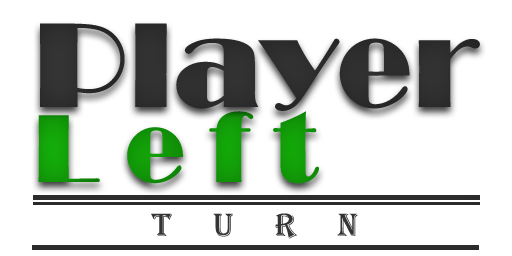
<style>
.page{position:relative;width:512px;height:256px;background:#ffffff}
.page>*{position:absolute;margin:0}
.t1{font:125px "Broadway";color:#383838}
.t2{font:100px "Broadway";color:#129d08}
.t3{font:33.3px "Algerian";color:#343434}
</style>
<div class="page">
<p class="t1" style="left:40px;top:23px;width:440px;height:88px">Player</p>
<p class="t2" style="left:38px;top:111px;width:281px;height:73px">L e f t</p>
<p class="t3" style="left:151px;top:213px;width:207px;height:26px">T     U     R     N</p>
</div>
